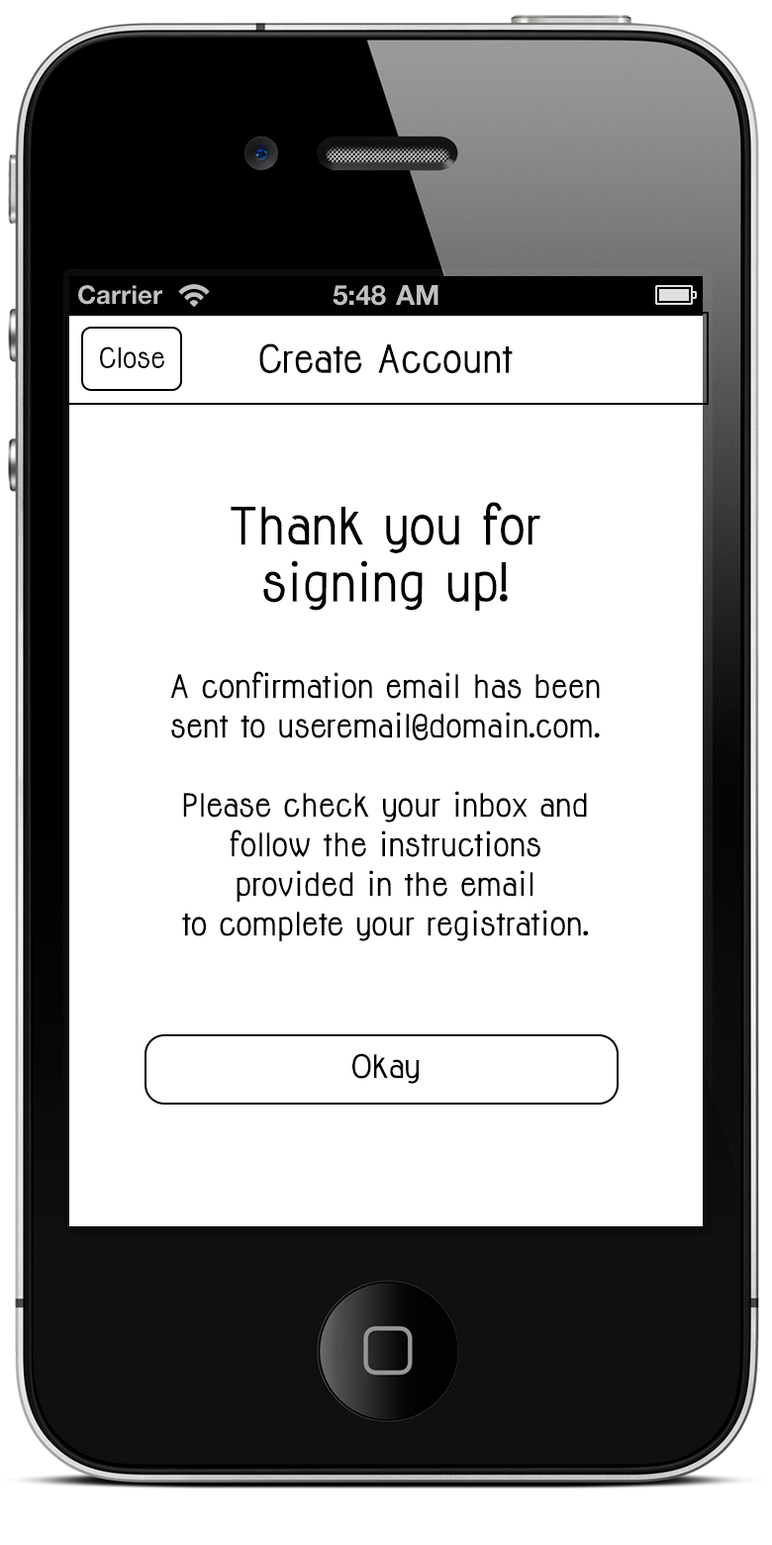
<style>
.page{position:relative;width:772px;height:1545px;background:#ffffff}
.page>*{position:absolute;margin:0}
.t1{font:25.7px "Jolly-Bold";color:#000000}
.t2{font:35.6px "Jolly-Bold";color:#000000}
.t3{font:29.7px/39.6px "Jolly-Bold";color:#000000}
.t4{font:47.5px "Jolly-Bold";color:#000000}
.t5{font:29.7px "Jolly-Bold";color:#000000}
</style>
<div class="page">
<p class="t1" style="left:100px;top:346px;width:64px;height:22px">Close</p>
<p class="t2" style="left:259px;top:343px;width:254px;height:31px">Create Account</p>
<p class="t3" style="left:170px;top:502px;width:430px;height:439px;text-align:center"><span class="t4">Thank you for <br>signing up!<br><br></span>A confirmation email has been sent to useremail@domain.com. <br><br>Please check your inbox and <br>follow the instructions <br>provided in the email <br>to complete your registration.</p>
<p class="t5" style="left:352px;top:1053px;width:67px;height:31px">Okay</p>
</div>
